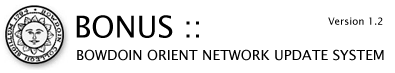
<style>
.page{position:relative;width:395px;height:73px;background:#ffffff}
.page>*{position:absolute;margin:0}
.t1{font:30px "LucidaSansUnicode";color:#000000}
.t2{font:10px "LucidaSansUnicode";color:#000000}
.t3{font:14px "LucidaSansUnicode";color:#000000}
</style>
<div class="page">
<p class="t1" style="left:76px;top:15px;width:123px;height:23px">BONUS ::</p>
<p class="t2" style="left:328px;top:17px;width:55px;height:8px">Version 1.2<br><span class="t1">V</span></p>
<p class="t3" style="left:77px;top:49px;width:307px;height:12px">BOWDOIN ORIENT NETWORK UPDATE SYSTEM</p>
</div>
